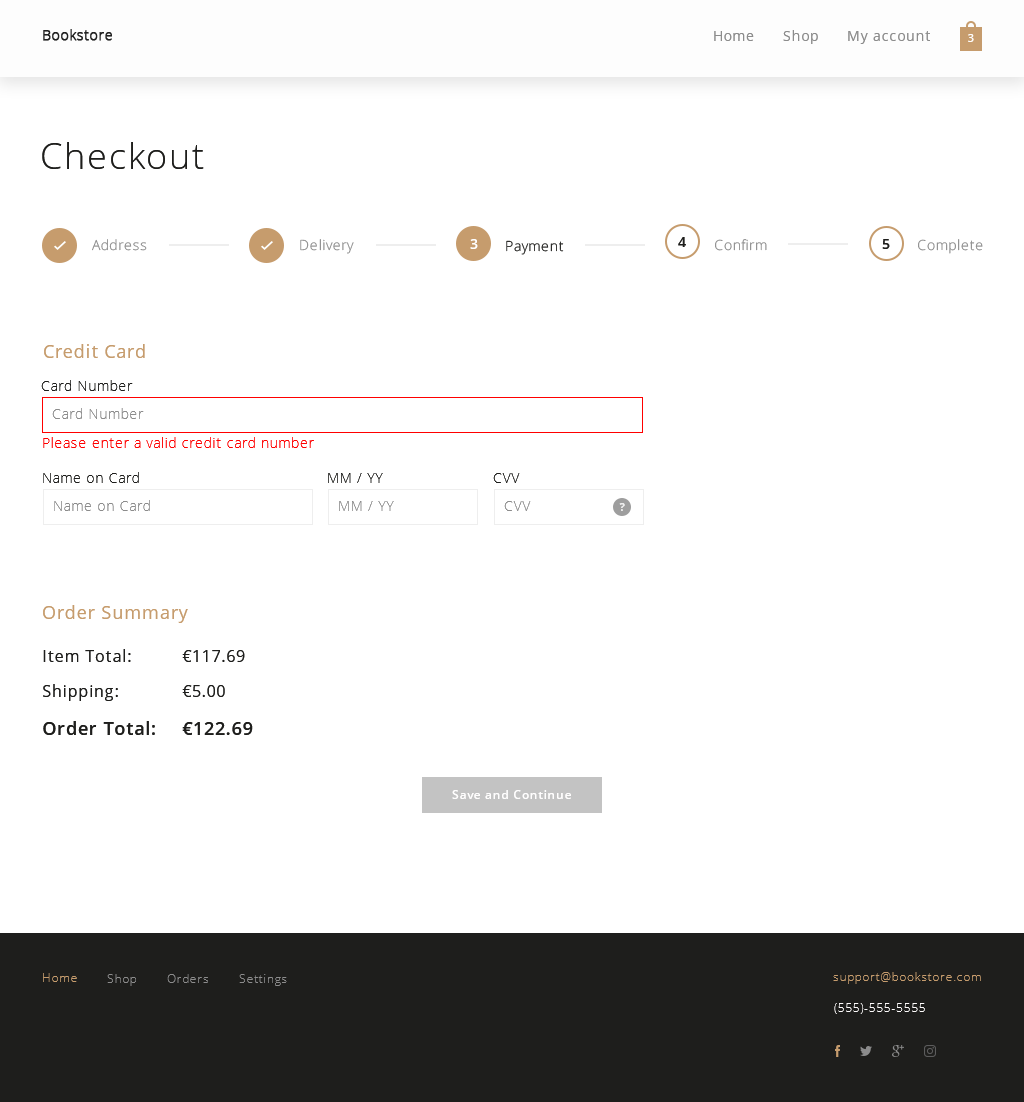
<style>
.page{position:relative;width:1024px;height:1102px;background:#ffffff}
.page>*{position:absolute;margin:0}
.t1{font:36px "OpenSans-Light";letter-spacing:0.05em;color:#1e1e1c}
.t2{font:14px "OpenSans-Light";letter-spacing:0.05em;color:#8c8c8c}
.t3{font:14px "OpenSans-Semibold";letter-spacing:0.05em;color:#ffffff}
.t4{font:14px "OpenSans-Light";letter-spacing:0.05em}
.t5{font:14px "OpenSans-Semibold";letter-spacing:0.05em;color:#1e1e1c}
.t6{font:18px "OpenSans";letter-spacing:0.05em;color:#c69c6d}
.t7{font:14px "OpenSans-Light";letter-spacing:0.05em;color:#1e1e1c}
.t8{font:14px "OpenSans-Light";letter-spacing:0.05em;color:#ff0000}
.t9{font:11px "OpenSans-Bold";letter-spacing:0.05em;color:#eeeeee}
.t10{font:16px "OpenSans";letter-spacing:0.05em;color:#1e1e1c}
.t11{font:18px "OpenSans-Semibold";letter-spacing:0.05em;color:#1e1e1c}
.t12{font:12px "OpenSans-Semibold";letter-spacing:0.05em;color:#fffefe}
</style>
<div class="page">
<p class="t1" style="left:42px;top:142px;width:162px;height:27px">Checkout</p>
<p class="t2" style="left:92px;top:239px;width:55px;height:12px">Address</p>
<p class="t2" style="left:300px;top:239px;width:54px;height:15px">Delivery</p>
<p class="t3" style="left:470px;top:239px;width:8px;height:10px">3</p>
<p class="t4" style="left:506px;top:240px;width:58px;height:15px">Payment</p>
<p class="t5" style="left:678px;top:237px;width:8px;height:10px">4</p>
<p class="t2" style="left:715px;top:239px;width:52px;height:12px">Confirm</p>
<p class="t5" style="left:882px;top:239px;width:8px;height:10px">5</p>
<p class="t2" style="left:918px;top:239px;width:65px;height:15px">Complete</p>
<p class="t6" style="left:44px;top:344px;width:101px;height:14px">Credit Card</p>
<p class="t7" style="left:41px;top:380px;width:92px;height:11px">Card Number</p>
<p class="t2" style="left:52px;top:408px;width:92px;height:11px">Card Number</p>
<p class="t8" style="left:43px;top:437px;width:271px;height:11px">Please enter a valid credit card number</p>
<p class="t7" style="left:43px;top:472px;width:96px;height:11px">Name on Card</p>
<p class="t7" style="left:328px;top:473px;width:55px;height:10px">MM / YY</p>
<p class="t7" style="left:493px;top:473px;width:27px;height:10px">CVV</p>
<p class="t2" style="left:54px;top:500px;width:96px;height:11px">Name on Card</p>
<p class="t2" style="left:339px;top:501px;width:55px;height:10px">MM / YY</p>
<p class="t2" style="left:504px;top:501px;width:27px;height:10px">CVV</p>
<p class="t9" style="left:619px;top:503px;width:6px;height:8px">?</p>
<p class="t6" style="left:43px;top:605px;width:145px;height:18px">Order Summary</p>
<p class="t10" style="left:43px;top:649px;width:88px;height:13px">Item Total:</p>
<p class="t10" style="left:182px;top:650px;width:63px;height:12px">€117.69</p>
<p class="t10" style="left:43px;top:684px;width:75px;height:17px">Shipping:</p>
<p class="t10" style="left:182px;top:685px;width:43px;height:12px">€5.00</p>
<p class="t11" style="left:43px;top:721px;width:112px;height:14px">Order Total:</p>
<p class="t11" style="left:182px;top:722px;width:71px;height:13px">€122.69</p>
<p class="t12" style="left:452px;top:790px;width:119px;height:9px">Save and Continue</p>
</div>
